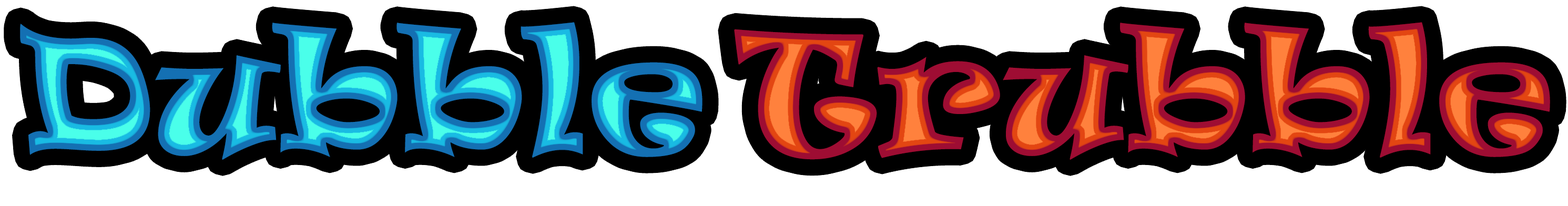
<style>
.page{position:relative;width:1568px;height:206px;background:#ffffff}
.page>*{position:absolute;margin:0}
.t1{font:157.7px "Ravie"}
</style>
<div class="page">
<p class="t1" style="left:20px;top:22px;width:682px;height:138px">Dubble</p>
<p class="t1" style="left:734px;top:22px;width:816px;height:138px">Trubble</p>
</div>
